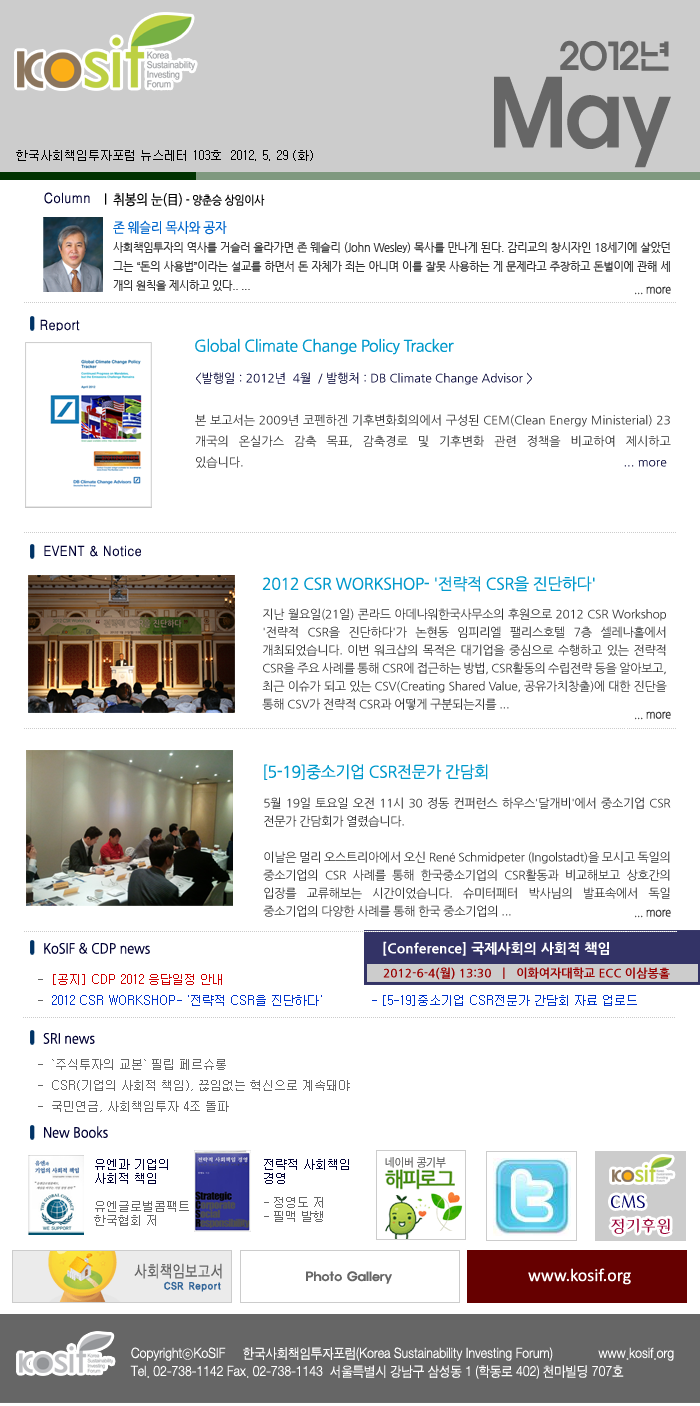
<style>
.page{position:relative;width:700px;height:1406px;background:#ffffff}
.page>*{position:absolute;margin:0}
.t1{font:36.1px/41.9px "ExpoM-HM";color:#666666;scale:0.89 1}
.t2{font:90.2px/41.9px "ExpoM-HM";color:#666666;scale:0.89 1}
.t3{font:12px "Gulim";color:#000000}
.t4{font:14px "H2gtrM";color:#000033;scale:0.9 1}
.t5{font:14px "NanumGothic";letter-spacing:-0.025em;color:#000000;scale:0.9 1}
.t6{font:12px "NanumGothic";letter-spacing:-0.025em;color:#000000;scale:0.9 1}
.t7{font:14px "NanumGothic";letter-spacing:-0.025em;color:#0066cc;scale:0.9 1}
.t8{font:11px "NanumGothic";letter-spacing:-0.025em;color:#333333}
.t9{font:12px "NanumGothic";letter-spacing:-0.025em;color:#333333;scale:0.9 1}
.t10{font:16px "NanumGothic";letter-spacing:-0.025em;color:#0099cc}
.t11{font:12px "NanumGothic";color:#333333}
.t12{font:12px "NanumGothic";color:#000033}
.t13{font:12px/18px "NanumGothic";letter-spacing:-0.025em;color:#333333}
.t14{font:14px "NanumGothic";color:#000033;scale:0.9 1}
.t15{font:14px "NanumGothicExtraBold";color:#ffffff}
.t16{font:12px "Gulim";color:#0033cc}
.t17{font:12px "Gulim";color:#666666}
.t18{font:12px "Gulim";color:#cc0000}
.t19{font:12px "NanumGothicBold";color:#990000}
.t20{font:12px/14px "Gulim";color:#000033}
.t21{font:12px/14px "Gulim";color:#666666}
</style>
<div class="page">
<p class="t1" style="left:494px;top:40px;width:177px;height:128px;text-align:right">2012년<br><span class="t2">May</span></p>
<p class="t3" style="left:16px;top:150px;width:297px;height:11px">한국사회책임투자포럼 뉴스레터 103호  2012. 5. 29 (화)</p>
<p class="t4" style="left:44px;top:192px;width:46px;height:12px">Column</p>
<p class="t5" style="left:105px;top:193px;width:160px;height:14px">l  취봉의 눈(目) <span class="t6">- 양춘승 상임이사</span></p>
<p class="t7" style="left:113px;top:220px;width:114px;height:15px">존 웨슬리 목사와 공자</p>
<p class="t8" style="left:113px;top:242px;width:557px;height:49px;text-align:justify">사회책임투자의 역사를 거슬러 올라가면 존 웨슬리 (John Wesley) 목사를 만나게 된다. 감리교의 창시자인 18세기에 살았던 그는 “돈의 사용법”이라는 설교를 하면서 돈 자체가 죄는 아니며 이를 잘못 사용하는 게 문제라고 주장하고 돈벌이에 관해 세 개의 원칙을 제시하고 있다.. ...</p>
<p class="t9" style="left:635px;top:286px;width:36px;height:9px">... more</p>
<p class="t4" style="left:40px;top:319px;width:40px;height:13px">Report</p>
<p class="t10" style="left:195px;top:338px;width:259px;height:17px">Global Climate Change Policy Tracker</p>
<p class="t11" style="left:195px;top:372px;width:476px;height:96px;text-align:justify"><span class="t12">&lt;발행일 : 2012년  4월  / 발행처 : DB Climate Change Advisor &gt;<br><br></span>본 보고서는 2009년 코펜하겐 기후변화회의에서 구성된 CEM(Clean Energy Ministerial) 23개국의 온실가스 감축 목표, 감축경로 및 기후변화 관련 정책을 비교하여 제시하고 있습니다. <span class="t12">                                                                                                                ... more</span></p>
<p class="t4" style="left:44px;top:545px;width:97px;height:12px">EVENT &amp; Notice</p>
<p class="t10" style="left:262px;top:576px;width:333px;height:16px">2012 CSR WORKSHOP- '전략적 CSR을 진단하다'</p>
<p class="t13" style="left:262px;top:608px;width:405px;height:102px;text-align:justify">지난 월요일(21일) 콘라드 아데나워한국사무소의 후원으로 2012 CSR Workshop '전략적 CSR을 진단하다'가 논현동 임피리엘 팰리스호텔 7층 셀레나홀에서 개최되었습니다. 이번 워크샵의 목적은 대기업을 중심으로 수행하고 있는 전략적 CSR을 주요 사례를 통해 CSR에 접근하는 방법, CSR활동의 수립전략 등을 알아보고, 최근 이슈가 되고 있는 CSV(Creating Shared Value, 공유가치창출)에 대한 진단을 통해 CSV가 전략적 CSR과 어떻게 구분되는지를 ...</p>
<p class="t9" style="left:635px;top:711px;width:36px;height:9px">... more</p>
<p class="t10" style="left:264px;top:764px;width:224px;height:16px">[5-19]중소기업 CSR전문가 간담회</p>
<p class="t13" style="left:263px;top:797px;width:408px;height:120px;text-align:justify">5월 19일 토요일 오전 11시 30 정동 컨퍼런스 하우스'달개비'에서 중소기업 CSR 전문가 간담회가 열렸습니다. <br><br>이날은 멀리 오스트리아에서 오신 René Schmidpeter (Ingolstadt)을 모시고 독일의 중소기업의 CSR 사례를 통해 한국중소기업의 CSR활동과 비교해보고 상호간의 입장를 교류해보는 시간이었습니다. 슈미터페터 박사님의 발표속에서 독일 중소기업의 다양한 사례를 통해 한국 중소기업의 ...</p>
<p class="t9" style="left:635px;top:909px;width:36px;height:9px">... more</p>
<p class="t14" style="left:44px;top:942px;width:106px;height:12px">KoSIF &amp; CDP news</p>
<p class="t15" style="left:383px;top:941px;width:226px;height:15px">[Conference] 국제사회의 사회적 책임</p>
<p class="t16" style="left:38px;top:974px;width:599px;height:32px"><span class="t17">-  </span><span class="t18">[공지] CDP 2012 응답일정 안내      <br></span><span class="t17">-  </span>2012 CSR WORKSHOP- '전략적 CSR을 진단하다'            - [5-19]중소기업 CSR전문가 간담회 자료 업로드</p>
<p class="t19" style="left:383px;top:967px;width:287px;height:13px">2012-6-4(월) 13:30  ㅣ  이화여자대학교 ECC 이삼봉홀</p>
<p class="t14" style="left:43px;top:1033px;width:52px;height:11px">SRI news</p>
<p class="t17" style="left:38px;top:1059px;width:312px;height:53px">-  `주식투자의 교본` 필립 페르슈롱   <br>-  CSR(기업의 사회적 책임), 끊임없는 혁신으로 계속돼야 <br>-  국민연금, 사회책임투자 4조 돌파</p>
<p class="t14" style="left:44px;top:1126px;width:64px;height:12px">New Books</p>
<p class="t20" style="left:94px;top:1159px;width:95px;height:67px">유엔과 기업의 사회적 책임<br><br><span class="t21">유엔글로벌콤팩트한국협회 저</span></p>
<p class="t21" style="left:264px;top:1159px;width:85px;height:63px"><span class="t20">전략적 사회책임 경영<br></span><br>- 정영도 저<br>- 필맥 발행</p>
</div>
